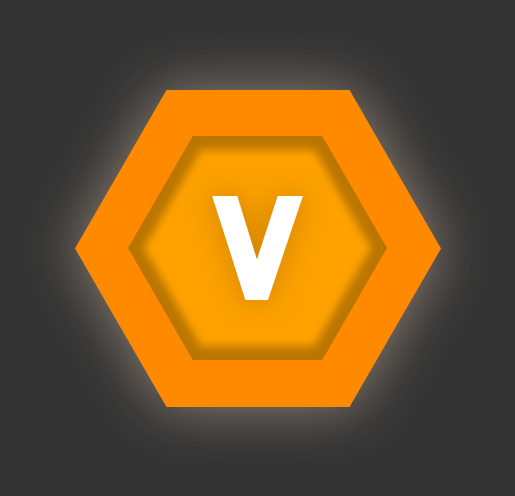
<style>
.page{position:relative;width:515px;height:496px;background:#333333}
.page>*{position:absolute;margin:0}
.t1{font:139.5px "TheBoldFont";color:#ffffff}
</style>
<div class="page">
<p class="t1" style="left:212px;top:196px;width:91px;height:104px">V</p>
</div>
